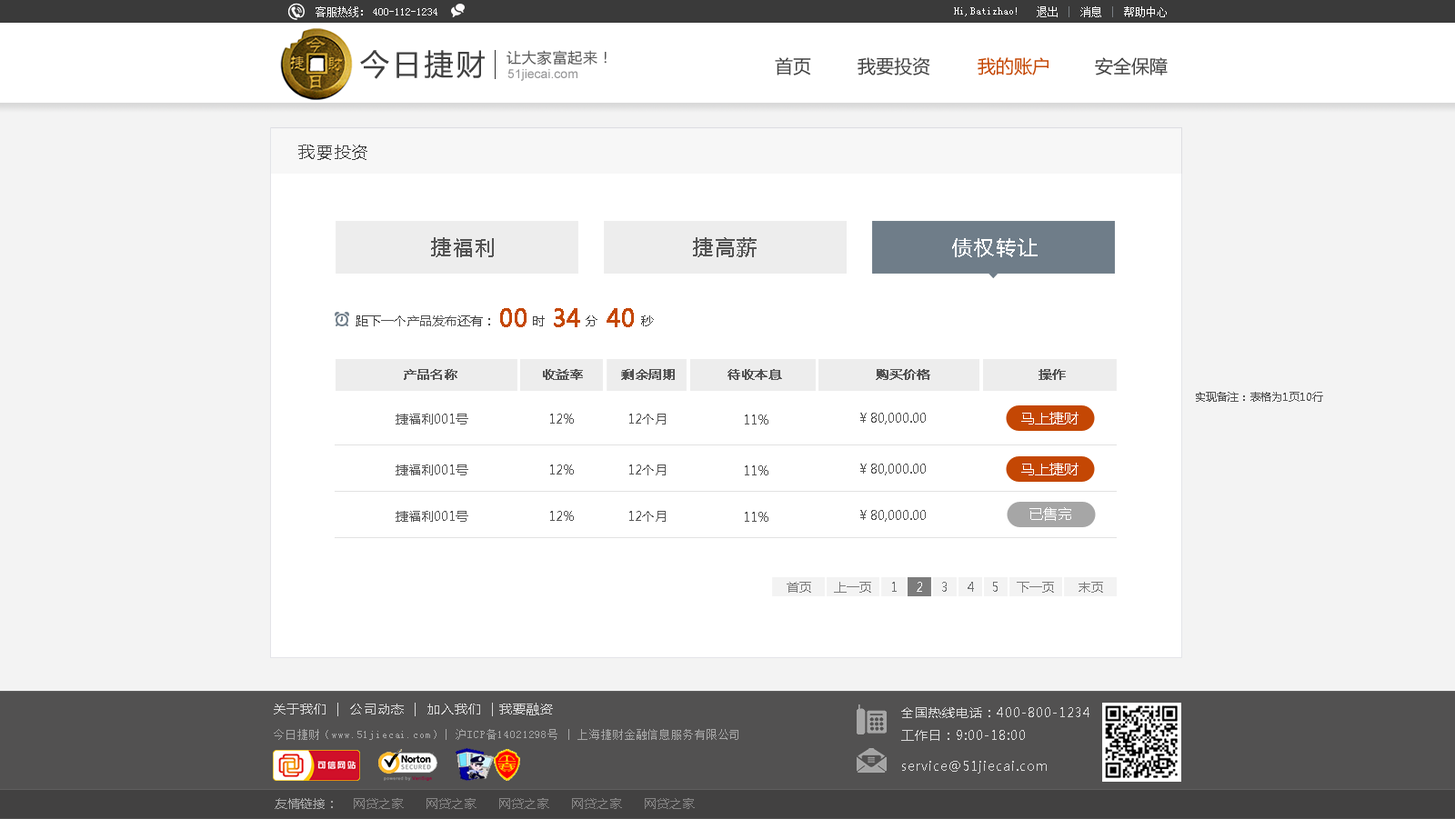
<style>
.page{position:relative;width:1455px;height:819px;background:#ffffff}
.page>*{position:absolute;margin:0}
.t1{font:10.9px "SimSun";color:#ffffff}
.t2{font:29.1px "MicrosoftYaHei";letter-spacing:0.1em;color:#3f3f3f}
.t3{font:14.6px "MicrosoftYaHei";letter-spacing:0.05em;color:#575757}
.t4{font:18.2px "MicrosoftYaHei";color:#414141}
.t5{font:18.2px "MicrosoftYaHei";color:#c44704}
.t6{font:12.7px "ArialMT";color:#969697}
.t7{font:16.4px "MicrosoftYaHei";letter-spacing:0.1em;color:#3f3f3f}
.t8{font:20px "MicrosoftYaHei";letter-spacing:0.1em;color:#545454}
.t9{font:20px "MicrosoftYaHei";letter-spacing:0.1em;color:#ffffff}
.t10{font:12.7px "MicrosoftYaHei";color:#545454}
.t11{font:12.7px "MicrosoftYaHei";color:#414141}
.t12{font:23.6px "MicrosoftYaHei";color:#c44704;font-weight:bold}
.t13{font:12.7px "MicrosoftYaHei";color:#545454;font-weight:bold}
.t14{font:10.9px "MicrosoftYaHei";color:#545454}
.t15{font:14.6px "MicrosoftYaHei";color:#ffffff}
.t16{font:12.7px "MicrosoftYaHei";color:#7c7c7c}
.t17{font:12.7px "MicrosoftYaHei";color:#6e7071}
.t18{font:12.7px "MicrosoftYaHei";color:#ffffff}
.t19{font:12.7px "MicrosoftYaHei";letter-spacing:0.07em;color:#dbdbdb}
.t20{font:12.7px "MicrosoftYaHei";letter-spacing:0.07em;color:#dadada}
.t21{font:10.9px "SimSun";letter-spacing:0.07em;color:#a7a7a7}
.t22{font:12.7px "MicrosoftYaHei";color:#858484}
.t23{font:12.7px "MicrosoftYaHei";color:#a7a7a7}
</style>
<div class="page">
<p class="t1" style="left:316px;top:6px;width:47px;height:11px">客服热线：</p>
<p class="t1" style="left:373px;top:8px;width:64px;height:7px">400-112-1234</p>
<p class="t1" style="left:954px;top:7px;width:63px;height:9px">Hi,Batizhao!</p>
<p class="t1" style="left:1037px;top:6px;width:130px;height:11px">退出    消息    帮助中心</p>
<p class="t2" style="left:360px;top:50px;width:125px;height:29px">今日捷财</p>
<p class="t3" style="left:507px;top:50px;width:100px;height:15px">让大家富起来！</p>
<p class="t4" style="left:775px;top:57px;width:36px;height:18px">首页</p>
<p class="t4" style="left:858px;top:57px;width:72px;height:18px">我要投资</p>
<p class="t5" style="left:978px;top:57px;width:71px;height:18px">我的账户</p>
<p class="t4" style="left:1095px;top:57px;width:73px;height:18px">安全保障</p>
<p class="t6" style="left:507px;top:69px;width:71px;height:12px">51jiecai.com</p>
<p class="t7" style="left:298px;top:145px;width:69px;height:15px">我要投资</p>
<p class="t8" style="left:431px;top:237px;width:63px;height:20px">捷福利</p>
<p class="t8" style="left:693px;top:237px;width:64px;height:20px">捷高薪</p>
<p class="t9" style="left:952px;top:238px;width:86px;height:19px">债权转让</p>
<p class="t10" style="left:356px;top:316px;width:134px;height:11px"><span class="t11">距下</span>一个产品发布<span class="t11">还有：</span></p>
<p class="t12" style="left:500px;top:308px;width:27px;height:19px">00</p>
<p class="t11" style="left:533px;top:316px;width:12px;height:11px">时</p>
<p class="t12" style="left:554px;top:308px;width:26px;height:19px">34</p>
<p class="t11" style="left:586px;top:316px;width:12px;height:11px">分</p>
<p class="t12" style="left:607px;top:308px;width:27px;height:19px">40</p>
<p class="t11" style="left:641px;top:316px;width:13px;height:11px">秒</p>
<p class="t13" style="left:404px;top:369px;width:53px;height:11px">产品名称</p>
<p class="t13" style="left:543px;top:369px;width:40px;height:11px">收益率</p>
<p class="t13" style="left:621px;top:369px;width:54px;height:11px">剩余周期</p>
<p class="t13" style="left:728px;top:369px;width:54px;height:11px">待收本息</p>
<p class="t13" style="left:876px;top:369px;width:54px;height:11px">购买价格</p>
<p class="t13" style="left:1039px;top:369px;width:27px;height:11px">操作</p>
<p class="t14" style="left:1196px;top:392px;width:127px;height:10px">实现备注：表格为1页10行</p>
<p class="t10" style="left:396px;top:414px;width:72px;height:11px">捷福利001号</p>
<p class="t10" style="left:550px;top:414px;width:24px;height:10px">12%</p>
<p class="t10" style="left:629px;top:414px;width:37px;height:11px">12个月</p>
<p class="t10" style="left:860px;top:413px;width:66px;height:12px">￥80,000.00</p>
<p class="t15" style="left:1021px;top:412px;width:58px;height:13px">马上捷财</p>
<p class="t10" style="left:745px;top:415px;width:24px;height:10px">11%</p>
<p class="t10" style="left:396px;top:465px;width:72px;height:11px">捷福利001号</p>
<p class="t10" style="left:550px;top:465px;width:24px;height:10px">12%</p>
<p class="t10" style="left:629px;top:465px;width:37px;height:11px">12个月</p>
<p class="t10" style="left:745px;top:466px;width:24px;height:10px">11%</p>
<p class="t10" style="left:860px;top:464px;width:66px;height:12px">￥80,000.00</p>
<p class="t15" style="left:1021px;top:463px;width:58px;height:13px">马上捷财</p>
<p class="t15" style="left:1030px;top:507px;width:41px;height:14px">已售完</p>
<p class="t10" style="left:396px;top:511px;width:72px;height:11px">捷福利001号</p>
<p class="t10" style="left:550px;top:511px;width:24px;height:10px">12%</p>
<p class="t10" style="left:629px;top:511px;width:37px;height:11px">12个月</p>
<p class="t10" style="left:745px;top:512px;width:24px;height:10px">11%</p>
<p class="t10" style="left:860px;top:510px;width:66px;height:12px">￥80,000.00</p>
<p class="t16" style="left:787px;top:582px;width:24px;height:11px">首页</p>
<p class="t16" style="left:834px;top:582px;width:37px;height:11px">上一页</p>
<p class="t17" style="left:892px;top:582px;width:5px;height:10px">1</p>
<p class="t18" style="left:917px;top:582px;width:5px;height:10px">2</p>
<p class="t17" style="left:942px;top:582px;width:5px;height:10px">3</p>
<p class="t17" style="left:968px;top:582px;width:6px;height:10px">4</p>
<p class="t17" style="left:993px;top:582px;width:5px;height:10px">5</p>
<p class="t16" style="left:1017px;top:582px;width:37px;height:11px">下一页</p>
<p class="t16" style="left:1079px;top:582px;width:24px;height:11px">末页</p>
<p class="t19" style="left:274px;top:703px;width:279px;height:14px">关于我们  |  公司动态  |  加入我们  | 我要融资</p>
<p class="t20" style="left:901px;top:708px;width:189px;height:33px">全国热线电话：400-800-1234<br>工作日：9:00-18:00</p>
<p class="t21" style="left:274px;top:729px;width:465px;height:11px">今日捷财（www.51jiecai.com）| 沪ICP备14021298号 | 上海捷财金融信息服务有限公司</p>
<p class="t20" style="left:902px;top:761px;width:145px;height:13px">service@51jiecai.com</p>
<p class="t22" style="left:275px;top:799px;width:420px;height:10px"><span class="t23">友情链接：</span>    网贷之家      网贷之家      网贷之家      网贷之家      网贷之家</p>
</div>
